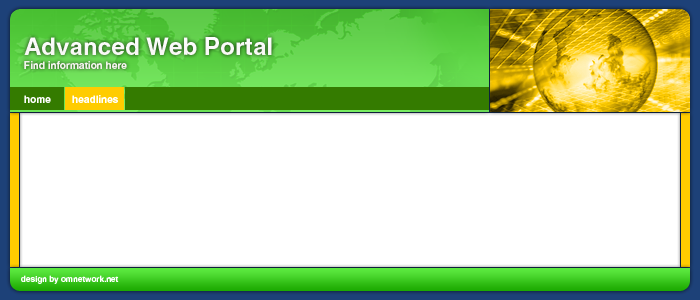
<style>
.page{position:relative;width:700px;height:300px;background:#ffffff}
.page>*{position:absolute;margin:0}
.t1{font:10px/14px "Helios-Bold";color:#fefefe}
.t2{font:24px/14px "Helios-Bold";color:#fefefe}
.t3{font:10px "Helios-Bold";color:#fefefe}
.t4{font:10px "Helios-Bold";color:#ffffff}
.t5{font:8px "Helios-Bold";color:#ffffff}
</style>
<div class="page">
<p class="t1" style="left:24px;top:37px;width:248px;height:32px"><span class="t2">Advanced Web Portal<br></span>Find information here</p>
<p class="t3" style="left:24px;top:95px;width:27px;height:8px">home</p>
<p class="t4" style="left:72px;top:95px;width:46px;height:8px">headlines</p>
<p class="t5" style="left:21px;top:275px;width:98px;height:9px">design by omnetwork.net</p>
</div>
